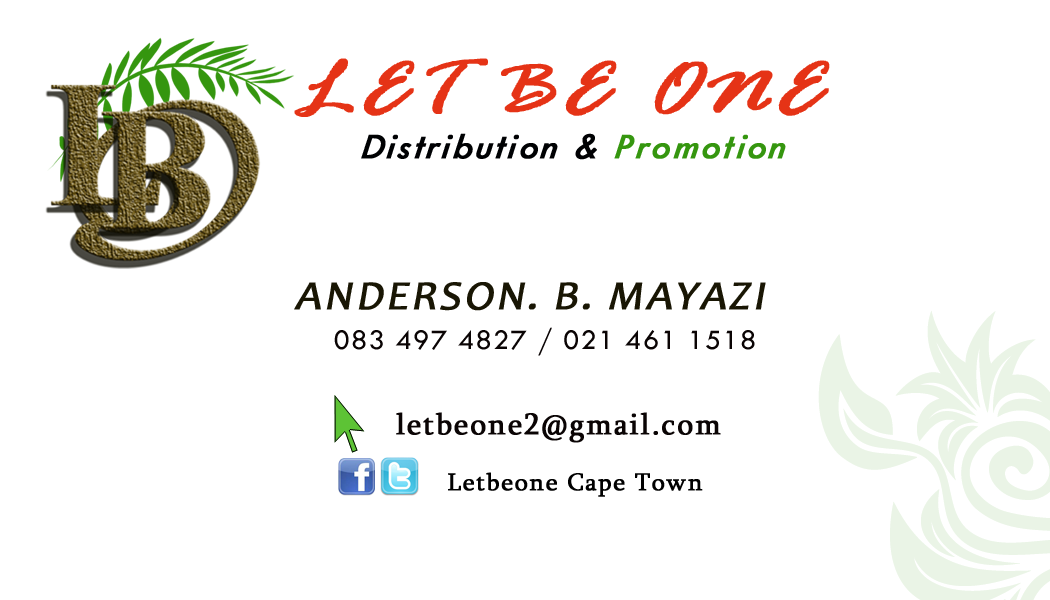
<style>
.page{position:relative;width:1050px;height:600px;background:#ffffff}
.page>*{position:absolute;margin:0}
.t1{font:80.2px "RageItalic";letter-spacing:0.05em;color:#e53316;font-weight:bold;scale:1.09 1}
.t2{font:37.5px "TwCenMT-Italic";letter-spacing:0.05em;color:#000103;font-weight:bold;font-style:italic}
.t3{font:37.5px "TwCenMT-Italic";letter-spacing:0.05em;color:#35960f;font-weight:bold;font-style:italic}
.t4{font:41.7px "Candara";letter-spacing:0.05em;color:#191604;font-weight:bold;font-style:italic}
.t5{font:29.2px "TwCenMT-Regular";letter-spacing:0.05em;color:#0a0404}
.t6{font:30.4px "Sylfaen";letter-spacing:0.05em;color:#0a0404;font-weight:bold}
.t7{font:25px "Sylfaen";letter-spacing:0.05em;color:#000000;font-weight:bold}
</style>
<div class="page">
<p class="t1" style="left:294px;top:58px;width:536px;height:59px">LET BE ONE</p>
<p class="t2" style="left:361px;top:133px;width:425px;height:27px">Distribution &amp; <span class="t3">Promotion</span></p>
<p class="t4" style="left:294px;top:282px;width:472px;height:29px">ANDERSON. B. MAYAZI</p>
<p class="t5" style="left:334px;top:327px;width:421px;height:29px">083 497 4827 / 021 461 1518</p>
<p class="t6" style="left:396px;top:412px;width:325px;height:31px">letbeone2@gmail.com</p>
<p class="t7" style="left:448px;top:472px;width:255px;height:25px">Letbeone Cape Town</p>
</div>
